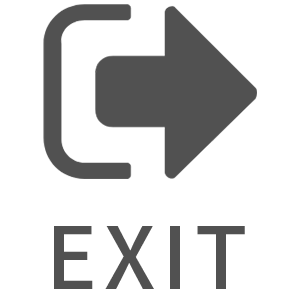
<style>
.page{position:relative;width:300px;height:300px;background:#ffffff}
.page>*{position:absolute;margin:0}
.t1{font:86px "SourceHanSansCN-Medium";letter-spacing:0.075em;color:#515151}
</style>
<div class="page">
<p class="t1" style="left:54px;top:226px;width:191px;height:63px">EXIT</p>
</div>
